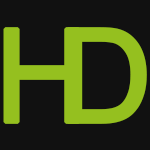
<style>
.page{position:relative;width:150px;height:150px;background:#111111}
.page>*{position:absolute;margin:0}
.t1{font:130px "ArialMT";color:#95c01f;font-weight:bold}
.t2{font:130px "ArialMT";letter-spacing:0.075em;color:#95c01f;font-weight:bold}
</style>
<div class="page">
<p class="t1" style="left:3px;top:27px;width:78px;height:97px">H</p>
<p class="t2" style="left:66px;top:27px;width:81px;height:97px">D</p>
</div>
